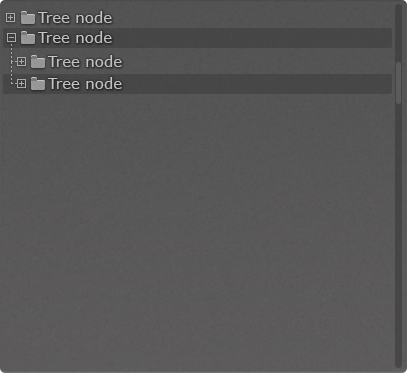
<style>
.page{position:relative;width:412px;height:376px}
.page>*{position:absolute;margin:0}
.t1{font:15px "Verdana";color:#d7d6d6}
</style>
<div class="page">
<p class="t1" style="left:37px;top:11px;width:75px;height:12px">Tree node</p>
<p class="t1" style="left:37px;top:31px;width:75px;height:12px">Tree node</p>
<p class="t1" style="left:47px;top:55px;width:75px;height:12px">Tree node</p>
<p class="t1" style="left:47px;top:77px;width:75px;height:12px">Tree node</p>
</div>
